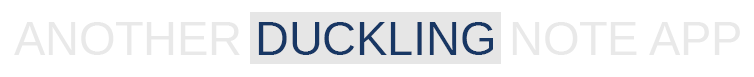
<style>
.page{position:relative;width:754px;height:77px;background:#ffffff}
.page>*{position:absolute;margin:0}
.t1{font:46.7px "Arimo-Regular";color:#183764}
.t2{font:46.7px "Arimo-Regular";color:#e9e9e9}
</style>
<div class="page">
<p class="t1" style="left:14px;top:22px;width:726px;height:33px"><span class="t2">ANOTHER </span>DUCKLING<span class="t2"> NOTE APP</span></p>
</div>
